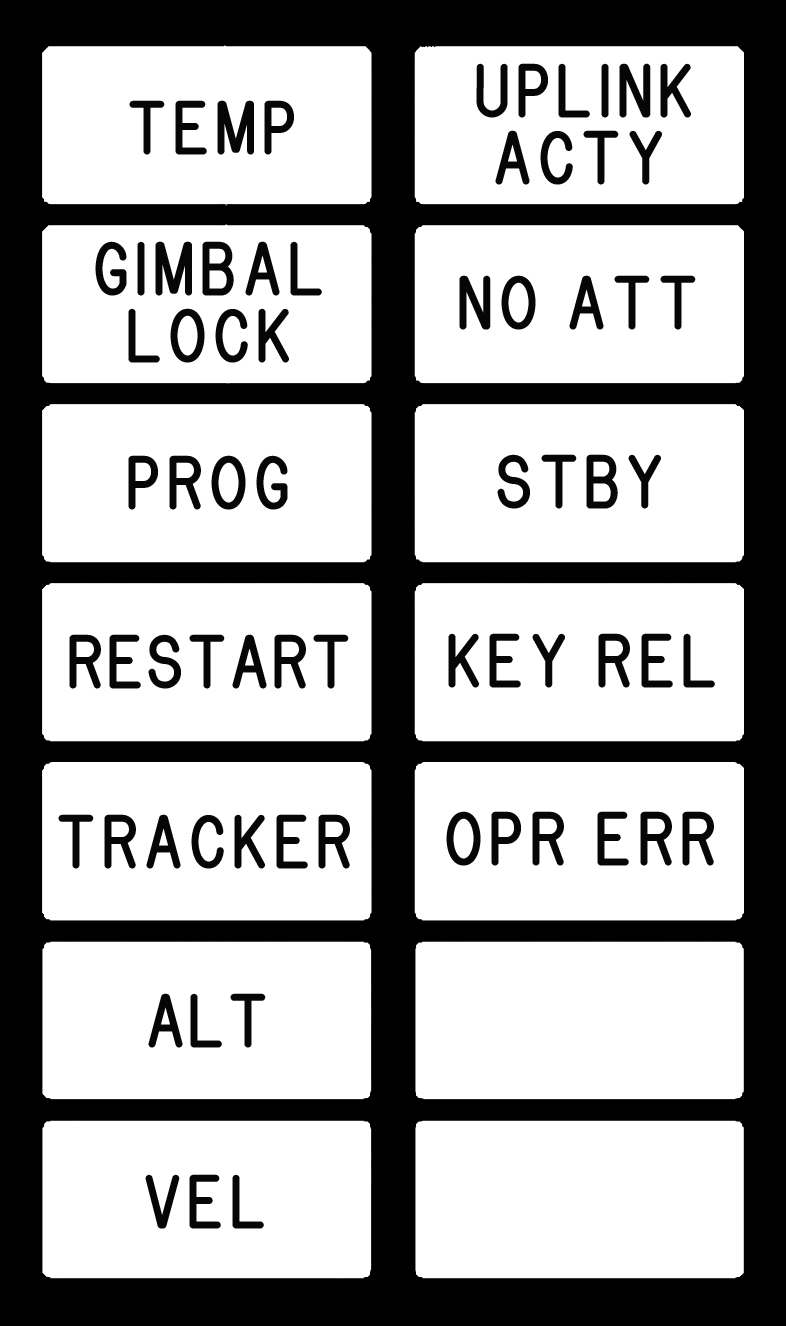
<style>
.page{position:relative;width:786px;height:1326px;background:#ffffff}
.page>*{position:absolute;margin:0}
.t1{font:58.3px "Gorton-Condensed";color:#060606}
.t2{font:58.3px "Gorton-Condensed";letter-spacing:-0.05em;color:#060606}
</style>
<div class="page">
<p class="t1" style="left:476px;top:63px;width:215px;height:55px">UPLINK</p>
<p class="t1" style="left:129px;top:100px;width:165px;height:55px">TEMP</p>
<p class="t1" style="left:495px;top:130px;width:167px;height:55px">ACTY</p>
<p class="t1" style="left:95px;top:241px;width:227px;height:55px">GIMBAL</p>
<p class="t1" style="left:459px;top:275px;width:237px;height:55px">NO ATT</p>
<p class="t1" style="left:128px;top:308px;width:161px;height:55px">LOCK</p>
<p class="t1" style="left:128px;top:455px;width:160px;height:55px">PROG</p>
<p class="t1" style="left:497px;top:454px;width:164px;height:55px">STBY</p>
<p class="t2" style="left:69px;top:634px;width:280px;height:55px">RESTART</p>
<p class="t1" style="left:448px;top:633px;width:267px;height:55px">KEY REL</p>
<p class="t1" style="left:58px;top:814px;width:292px;height:55px">TRACKER</p>
<p class="t1" style="left:446px;top:811px;width:268px;height:55px">OPR ERR</p>
<p class="t2" style="left:148px;top:993px;width:118px;height:55px">ALT</p>
<p class="t1" style="left:145px;top:1174px;width:119px;height:55px">VEL</p>
</div>
